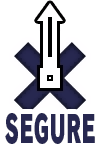
<style>
.page{position:relative;width:100px;height:150px;background:#ffffff}
.page>*{position:absolute;margin:0}
.t1{font:37.3px "RodinNTLGPro-UB";color:#272850;scale:0.54 1}
</style>
<div class="page">
<p class="t1" style="left:5px;top:113px;width:90px;height:31px">SEGURE</p>
</div>
